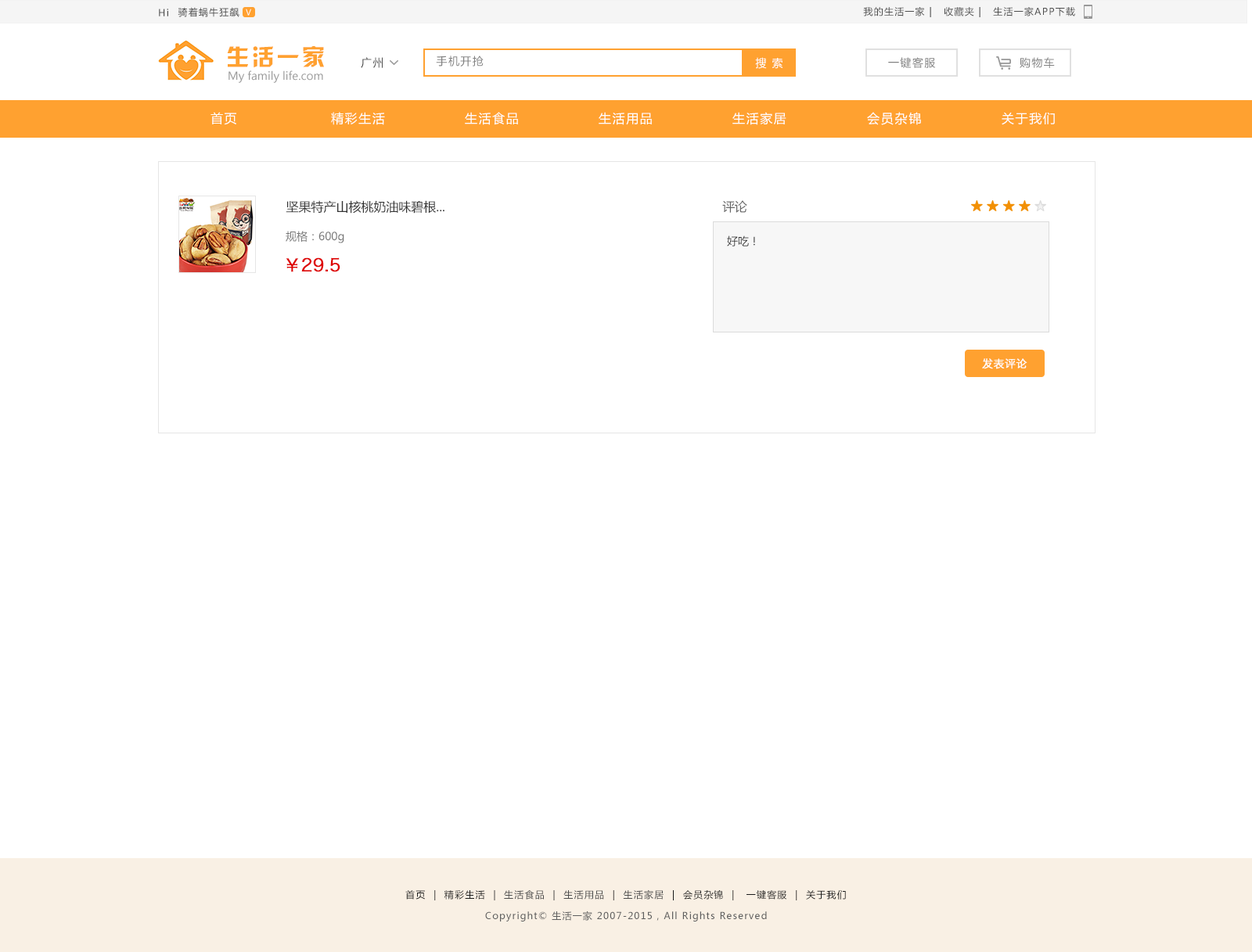
<style>
.page{position:relative;width:1252px;height:952px;background:#ffffff}
.page>*{position:absolute;margin:0}
.t1{font:9.4px "MicrosoftYaHei";letter-spacing:0.1em;color:#4d4d4d}
.t2{font:7.8px "MicrosoftYaHei";letter-spacing:0.1em;color:#ffffff}
.t3{font:22.7px "HYk2gj";letter-spacing:0.1em;color:#ffa130}
.t4{font:11px "MicrosoftYaHei";letter-spacing:0.1em;color:#4d4d4d}
.t5{font:11px "MicrosoftYaHei";letter-spacing:0.1em;color:#808080}
.t6{font:11px "MicrosoftYaHei";letter-spacing:0.1em;color:#ffffff}
.t7{font:11px "MicrosoftYaHei";color:#999999}
.t8{font:12.5px "MicrosoftYaHei";letter-spacing:0.1em;color:#ffffff}
.t9{font:12.9px "MicrosoftYaHei";letter-spacing:0.1em;color:#ffffff}
.t10{font:12.6px "MicrosoftYaHei";color:#333333}
.t11{font:12.5px "MicrosoftYaHei";letter-spacing:-0.02em;color:#666666}
.t12{font:11px "MicrosoftYaHei";color:#757575}
.t13{font:11px "MicrosoftYaHei";color:#333333}
.t14{font:17.3px "HiraginoSansGB-W3";color:#de0000;font-weight:bold}
.t15{font:11px "HiraginoSansGB-W3";color:#ffffff;font-weight:bold}
.t16{font:9.4px "MicrosoftYaHei";letter-spacing:0.1em;color:#1a1a1a}
.t17{font:9.4px "MicrosoftYaHei";letter-spacing:0.1em;color:#5e5e5e}
</style>
<div class="page">
<p class="t1" style="left:159px;top:9px;width:9px;height:7px">Hi</p>
<p class="t1" style="left:178px;top:7px;width:61px;height:10px">骑着蜗牛狂飙</p>
<p class="t2" style="left:246px;top:9px;width:5px;height:7px">V</p>
<p class="t1" style="left:863px;top:7px;width:212px;height:10px">我的生活一家 |   收藏夹 |   生活一家APP下载</p>
<p class="t3" style="left:227px;top:46px;width:97px;height:22px">生活一家</p>
<p class="t4" style="left:361px;top:57px;width:22px;height:11px">广州</p>
<p class="t5" style="left:436px;top:56px;width:48px;height:11px">手机开抢</p>
<p class="t6" style="left:755px;top:57px;width:28px;height:12px">搜 索</p>
<p class="t5" style="left:888px;top:57px;width:48px;height:11px">一键客服</p>
<p class="t5" style="left:1020px;top:57px;width:35px;height:11px">购物车</p>
<p class="t7" style="left:229px;top:70px;width:94px;height:13px">My family life.com</p>
<p class="t8" style="left:211px;top:112px;width:25px;height:13px">首页</p>
<p class="t8" style="left:331px;top:112px;width:54px;height:13px">精彩生活</p>
<p class="t8" style="left:465px;top:112px;width:53px;height:13px">生活食品</p>
<p class="t8" style="left:599px;top:112px;width:53px;height:13px">生活用品</p>
<p class="t8" style="left:732px;top:112px;width:54px;height:13px">生活家居</p>
<p class="t9" style="left:867px;top:112px;width:54px;height:13px">会员杂锦</p>
<p class="t8" style="left:1002px;top:112px;width:53px;height:13px">关于我们</p>
<p class="t10" style="left:286px;top:200px;width:158px;height:14px">坚果特产山核桃奶油味碧根...</p>
<p class="t11" style="left:722px;top:200px;width:25px;height:13px">评论</p>
<p class="t12" style="left:286px;top:231px;width:58px;height:12px">规格：600g</p>
<p class="t13" style="left:727px;top:236px;width:28px;height:11px">好吃！</p>
<p class="t14" style="left:286px;top:257px;width:54px;height:15px">￥29.5</p>
<p class="t15" style="left:982px;top:358px;width:45px;height:11px">发表评论</p>
<p class="t16" style="left:405px;top:890px;width:441px;height:11px">首页  |  精彩生活  |  <span class="t1">生活食品</span>  |  <span class="t1">生活用品</span>  |  <span class="t1">生活家居</span>  |  会员杂锦  |   一键客服  |  关于我们</p>
<p class="t17" style="left:485px;top:911px;width:282px;height:11px">Copyright© 生活一家 2007-2015，All Rights Reserved</p>
</div>
